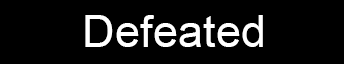
<style>
.page{position:relative;width:344px;height:64px;background:#000000}
.page>*{position:absolute;margin:0}
.t1{font:45.3px "ArialMT";color:#ffffff}
</style>
<div class="page">
<p class="t1" style="left:85px;top:15px;width:178px;height:32px">Defeated</p>
</div>
